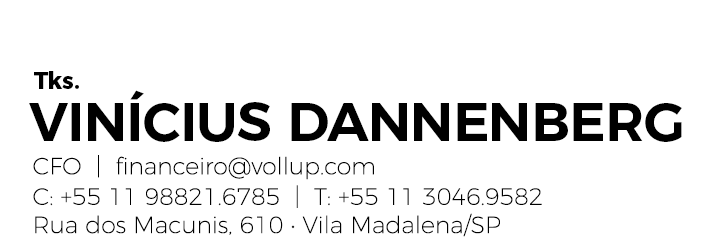
<style>
.page{position:relative;width:709px;height:249px;background:#ffffff}
.page>*{position:absolute;margin:0}
.t1{font:23.6px "Montserrat-Bold";color:#000000}
.t2{font:54.6px "Montserrat-SemiBold";letter-spacing:-0.012em;color:#000000;text-transform:uppercase}
.t3{font:23.6px/28.3px "Montserrat-ExtraLight";color:#000000}
</style>
<div class="page">
<p class="t1" style="left:34px;top:71px;width:45px;height:18px">Tks.</p>
<p class="t2" style="left:29px;top:90px;width:653px;height:52px">VINÍCIUS DANNENBERG</p>
<p class="t3" style="left:33px;top:155px;width:509px;height:82px">CFO  |  financeiro@vollup.com<br>C: +55 11 98821.6785  |  T: +55 11 3046.9582<br>Rua dos Macunis, 610 • Vila Madalena/SP</p>
</div>
